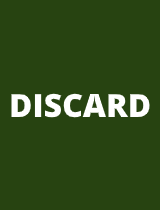
<style>
.page{position:relative;width:160px;height:210px;background:#274311}
.page>*{position:absolute;margin:0}
.t1{font:32px "OpenSans-ExtraBold";color:#ffffff}
</style>
<div class="page">
<p class="t1" style="left:11px;top:93px;width:139px;height:25px">DISCARD</p>
</div>
